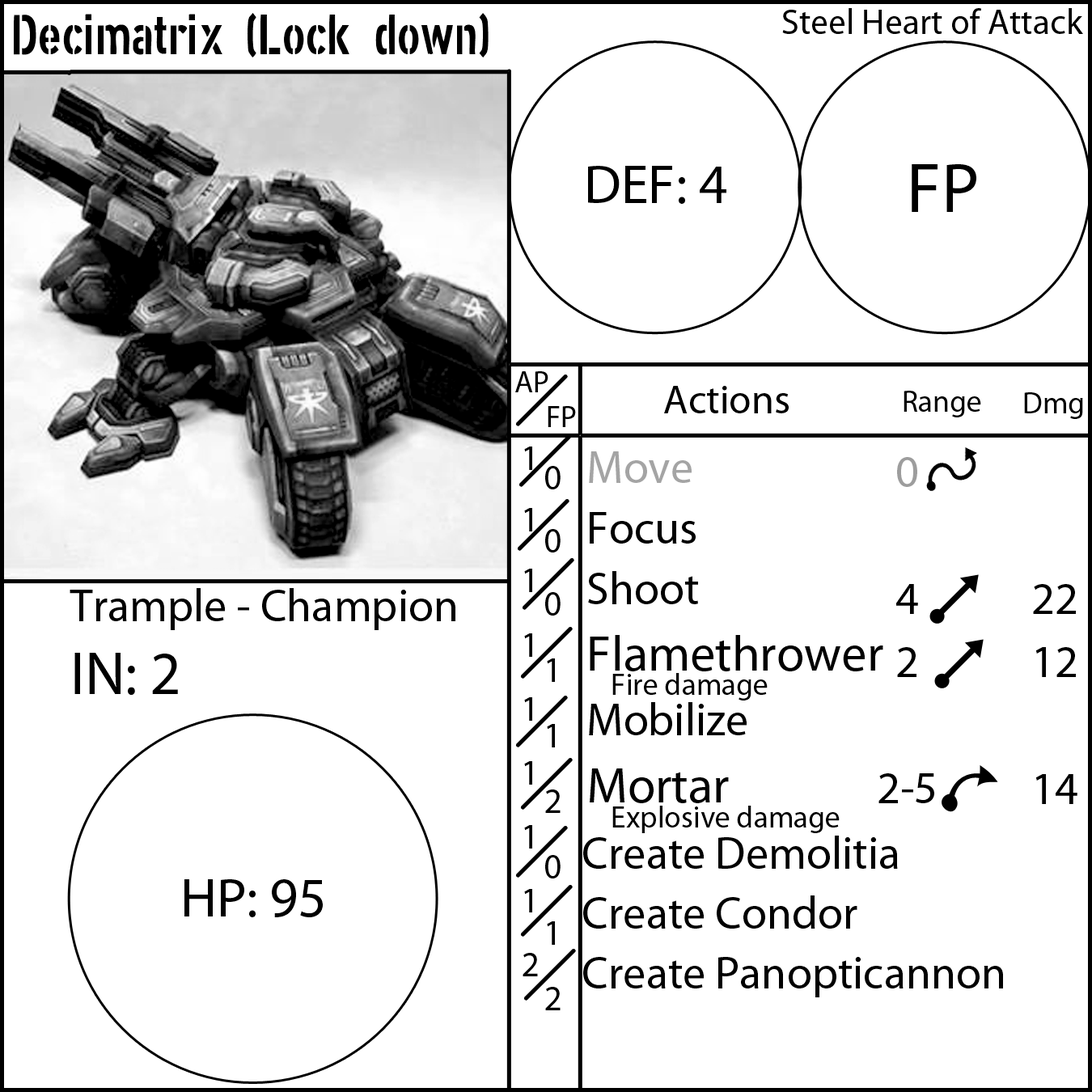
<style>
.page{position:relative;width:1092px;height:1092px;background:#ffffff}
.page>*{position:absolute;margin:0}
.t1{font:55.6px "XXIISTRAIGHT-ARMY";color:#000000}
.t2{font:55.6px "MyriadPro-Regular";color:#000000}
.t3{font:70.8px "MyriadPro-Regular";color:#000000}
.t4{font:30.3px "MyriadPro-Regular";color:#000000}
.t5{font:40.4px "MyriadPro-Regular";color:#000000}
.t6{font:35.4px "MyriadPro-Regular";color:#000000}
.t7{font:45.5px "MyriadPro-Regular";color:#000000}
.t8{font:45.5px "MyriadPro-Regular";color:#9a9a9a}
.t9{font:50.6px "MyriadPro-Regular";color:#000000}
.t10{font:45.5px "MyriadPro-Regular";color:#939393}
.t11{font:60.7px "MyriadPro-Regular";color:#000000}
</style>
<div class="page">
<p class="t1" style="left:14px;top:13px;width:475px;height:44px">Decimatrix (Lock down)</p>
<p class="t2" style="left:588px;top:166px;width:138px;height:38px">DEF: 4</p>
<p class="t3" style="left:912px;top:164px;width:64px;height:48px">FP</p>
<p class="t4" style="left:515px;top:371px;width:33px;height:21px">AP</p>
<p class="t5" style="left:664px;top:386px;width:125px;height:27px">Actions</p>
<p class="t4" style="left:904px;top:391px;width:77px;height:26px">Range</p>
<p class="t4" style="left:1024px;top:392px;width:59px;height:27px">Dmg</p>
<p class="t4" style="left:548px;top:406px;width:28px;height:21px">FP</p>
<p class="t6" style="left:523px;top:447px;width:15px;height:529px">1<br>1<br>1<br>1<br>1<br>1<br>1<br>1<br>2</p>
<p class="t7" style="left:583px;top:451px;width:420px;height:546px"><span class="t8">Move<br></span>Focus<br>Shoot<br><span class="t9">Flamethrower<br></span><span class="t4"> Fire damage<br></span>Mobilize<br><span class="t9">Mortar<br> </span><span class="t4">Explosive damage<br></span>Create Demolitia<br>Create Condor<br>Create Panopticannon</p>
<p class="t7" style="left:878px;top:457px;width:56px;height:346px;text-align:center"><span class="t10">0<br><br></span>4<br>2<br><br>2-5</p>
<p class="t6" style="left:545px;top:466px;width:16px;height:544px">0<br>0<br>0<br>1<br>1<br>2<br>0<br>1<br>2</p>
<p class="t7" style="left:70px;top:588px;width:385px;height:107px">Trample - Champion<br><span class="t11">IN: 2</span></p>
<p class="t7" style="left:1033px;top:584px;width:44px;height:220px;text-align:center">22<br>12<br><br>14</p>
<p class="t2" style="left:184px;top:879px;width:139px;height:38px">HP: 95</p>
</div>
